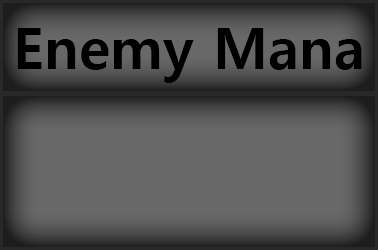
<style>
.page{position:relative;width:378px;height:250px;background:#686868}
.page>*{position:absolute;margin:0}
.t1{font:57px "MalgunGothicBold";color:#000000}
</style>
<div class="page">
<p class="t1" style="left:17px;top:28px;width:345px;height:55px">Enemy Mana</p>
</div>
